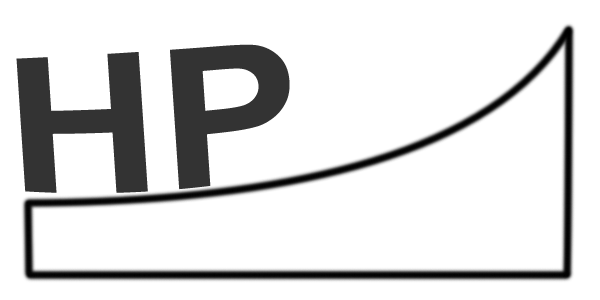
<style>
.page{position:relative;width:600px;height:300px;background:#ffffff}
.page>*{position:absolute;margin:0}
.t1{font:183.3px "Arial-BoldMT";color:#333333;scale:1.16 1}
</style>
<div class="page">
<p class="t1" style="left:16px;top:44px;width:274px;height:149px;rotate:-4deg">HP</p>
</div>
